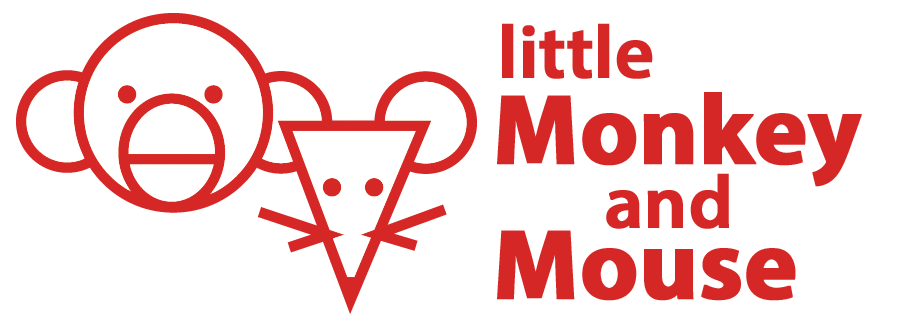
<style>
.page{position:relative;width:900px;height:320px;background:#ffffff}
.page>*{position:absolute;margin:0}
.t1{font:75px "MyriadPro-Semibold";letter-spacing:-0.01em;color:#d62727;font-weight:bold}
.t2{font:100px "MyriadPro-Bold";letter-spacing:-0.01em;color:#d62727;font-weight:bold}
</style>
<div class="page">
<p class="t1" style="left:502px;top:23px;width:151px;height:56px">little</p>
<p class="t2" style="left:497px;top:92px;width:365px;height:95px">Monkey</p>
<p class="t1" style="left:606px;top:173px;width:123px;height:56px">and</p>
<p class="t2" style="left:497px;top:230px;width:299px;height:71px">Mouse</p>
</div>
